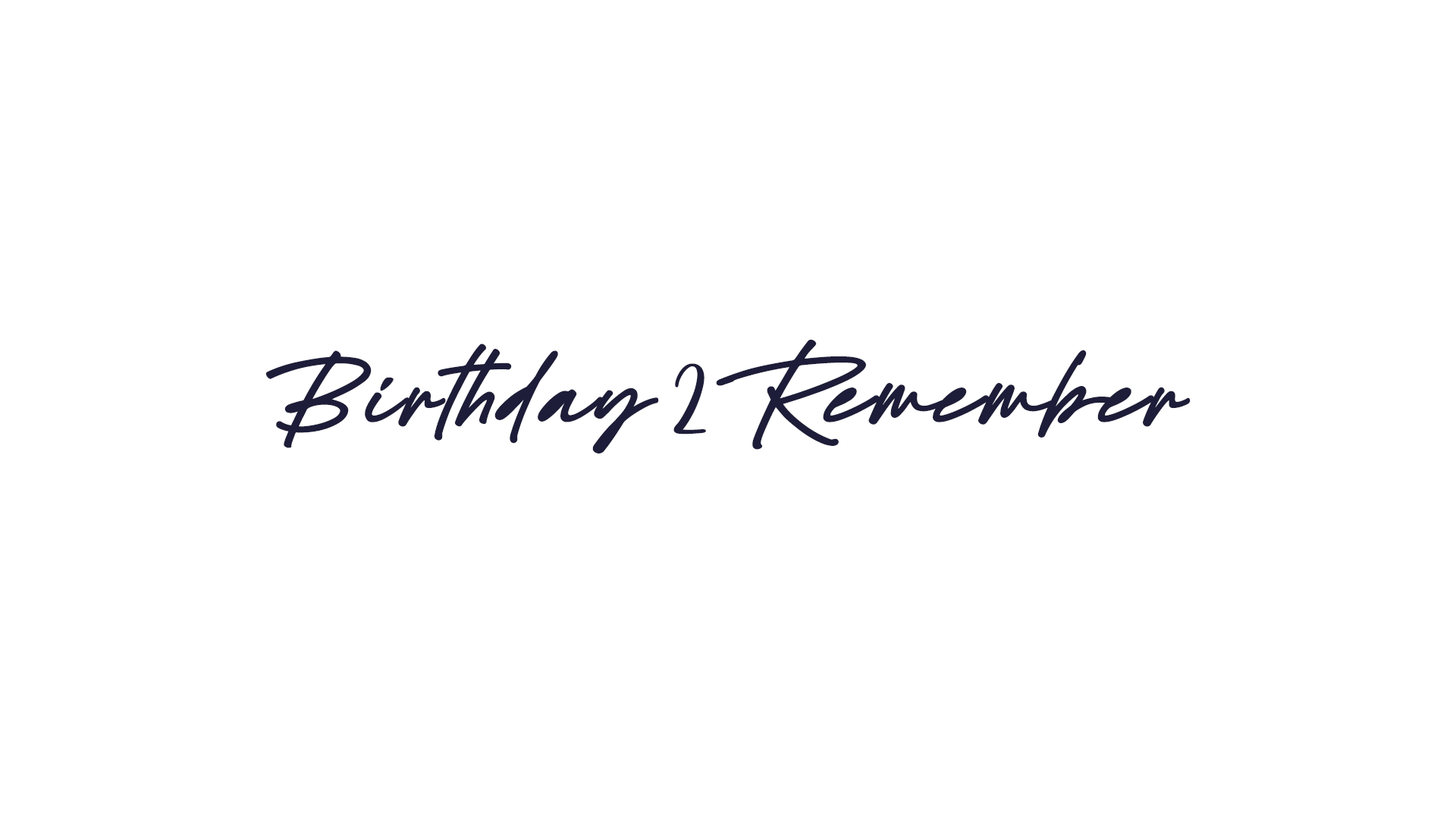
<style>
.page{position:relative;width:1456px;height:819px;background:#ffffff}
.page>*{position:absolute;margin:0}
.t1{font:94.8px "BlackSignaturePERSONALUSEONLY-Regular";letter-spacing:0.05em;color:#1d1d39}
.t2{font:105.4px "Bernadette";letter-spacing:0.05em;color:#1d1d39}
</style>
<div class="page">
<p class="t1" style="left:265px;top:340px;width:926px;height:113px">Birthday   Remember</p>
<p class="t2" style="left:673px;top:363px;width:33px;height:72px">2</p>
</div>
